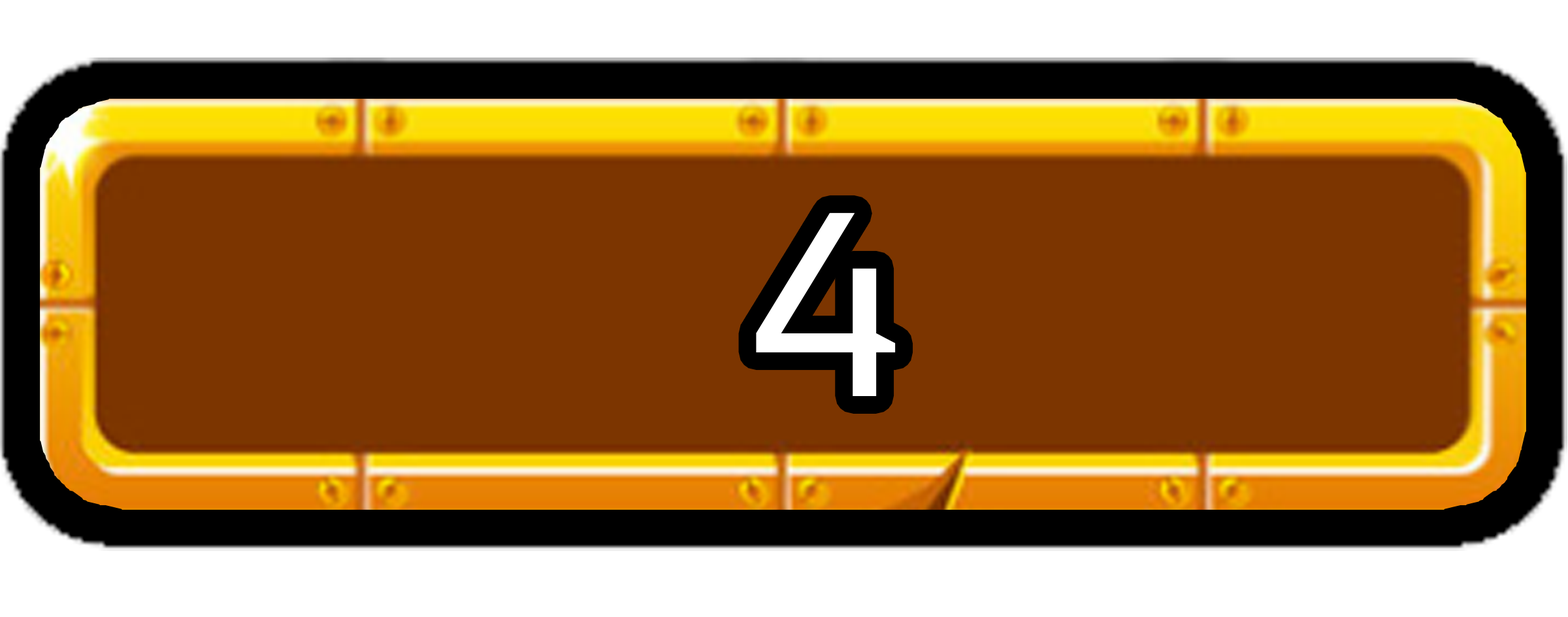
<style>
.page{position:relative;width:1568px;height:617px;background:#7c3500}
.page>*{position:absolute;margin:0}
.t1{font:409px "SB-Modern";color:#ffffff}
</style>
<div class="page">
<p class="t1" style="left:756px;top:212px;width:140px;height:184px">4</p>
</div>
